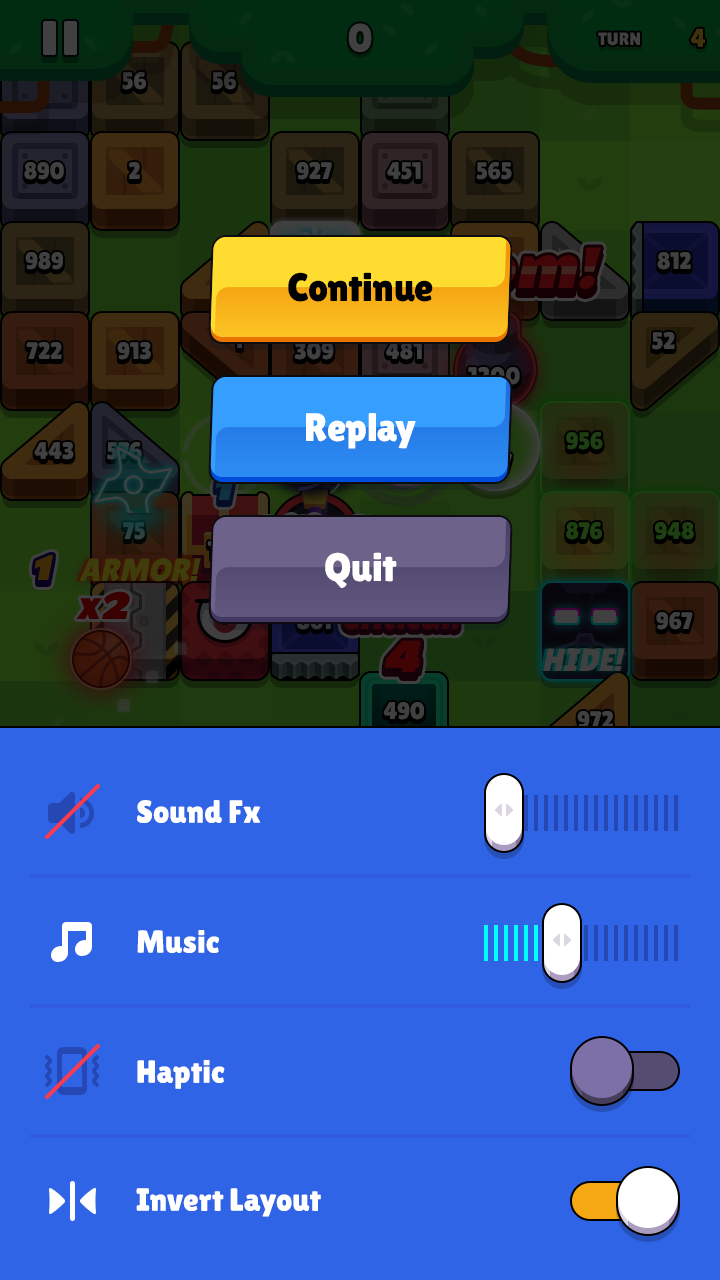
<style>
.page{position:relative;width:720px;height:1280px;background:#2f64e6}
.page>*{position:absolute;margin:0}
.t1{font:39.7px "LilitaOne";color:#000000}
.t2{font:39.7px "LilitaOne";color:#ffffff}
.t3{font:32px/130px "LilitaOne";color:#ffffff}
.t4{font:32px "LilitaOne";color:#ffffff}
</style>
<div class="page">
<p class="t1" style="left:288px;top:272px;width:145px;height:30px">Continue</p>
<p class="t2" style="left:306px;top:413px;width:110px;height:36px">Replay</p>
<p class="t2" style="left:325px;top:552px;width:72px;height:36px">Quit</p>
<p class="t3" style="left:137px;top:800px;width:124px;height:289px">Sound Fx<br>Music<br>Haptic</p>
<p class="t4" style="left:136px;top:1188px;width:185px;height:29px">Invert Layout</p>
</div>
